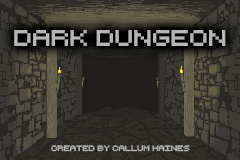
<style>
.page{position:relative;width:240px;height:160px}
.page>*{position:absolute;margin:0}
.t1{font:22.2px "RetroComputer";color:#b6b6b6}
.t2{font:7.4px "RetroComputer";color:#b6b6b6}
</style>
<div class="page">
<p class="t1" style="left:14px;top:30px;width:212px;height:16px">Dark Dungeon</p>
<p class="t2" style="left:51px;top:145px;width:139px;height:7px">Created by Callum Haines</p>
</div>
